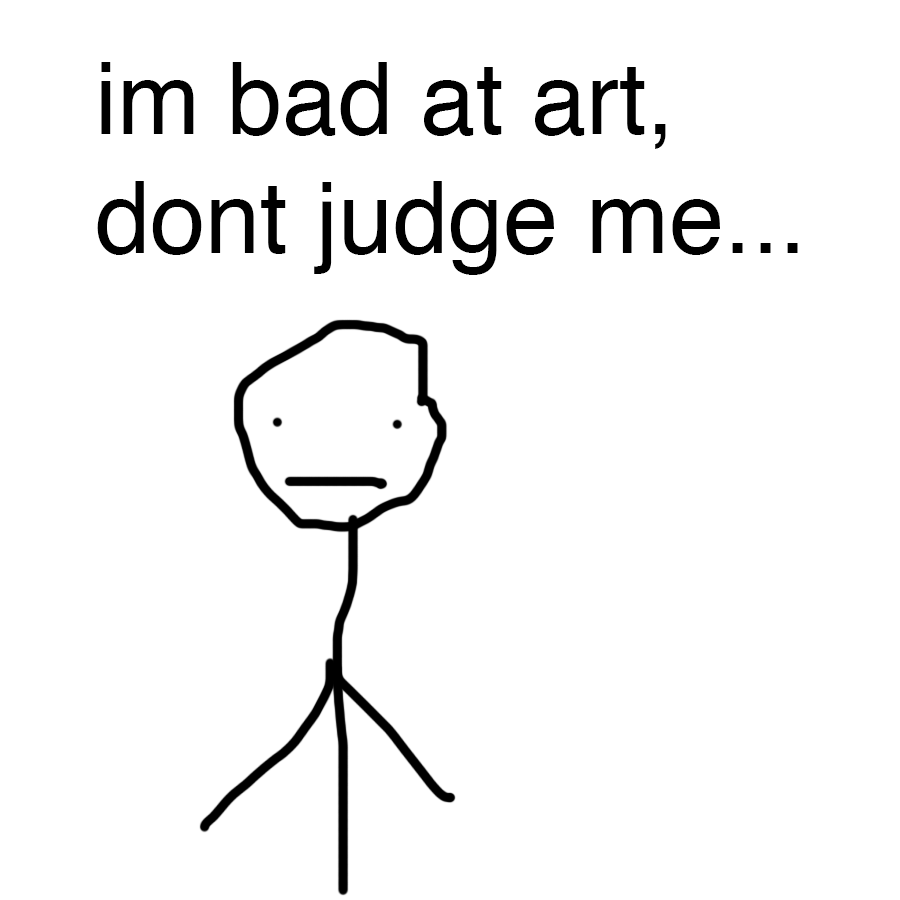
<style>
.page{position:relative;width:900px;height:900px;background:#ffffff}
.page>*{position:absolute;margin:0}
.t1{font:99.3px "Helvetica";color:#000000}
</style>
<div class="page">
<p class="t1" style="left:97px;top:62px;width:701px;height:213px">im bad at art, dont judge me...</p>
</div>
